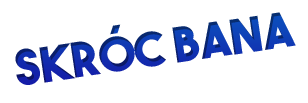
<style>
.page{position:relative;width:308px;height:103px;background:#ffffff}
.page>*{position:absolute;margin:0}
.t1{font:48px "TheBoldFont"}
</style>
<div class="page">
<p class="t1" style="left:15px;top:12px;width:281px;height:73px;rotate:-8deg">skróc bana</p>
</div>
